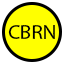
<style>
.page{position:relative;width:64px;height:64px;background:#ffff00}
.page>*{position:absolute;margin:0}
.t1{font:20.8px "MyriadPro-Regular";color:#000000}
</style>
<div class="page">
<p class="t1" style="left:8px;top:25px;width:47px;height:14px">CBRN</p>
</div>
